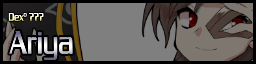
<style>
.page{position:relative;width:256px;height:64px;background:#7f7f7f}
.page>*{position:absolute;margin:0}
.t1{font:12px "ChaneyThinNormal"}
.t2{font:36px "ChaneyThinNormal"}
</style>
<div class="page">
<p class="t1" style="left:8px;top:13px;width:36px;height:8px">Dexº ???</p>
<p class="t2" style="left:9px;top:31px;width:64px;height:29px">Ariya</p>
</div>
